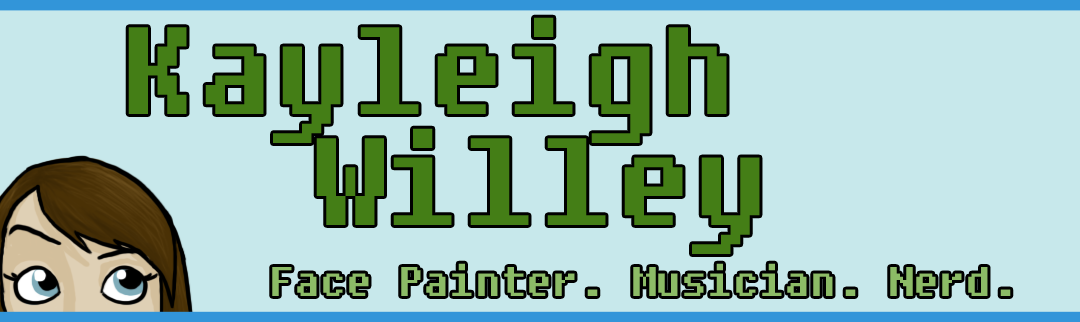
<style>
.page{position:relative;width:1080px;height:322px;background:#c7e8eb}
.page>*{position:absolute;margin:0}
.t1{font:123.3px "Fixedsys";color:#457e16}
.t2{font:41.3px "Fixedsys";color:#8dbc66}
</style>
<div class="page">
<p class="t1" style="left:128px;top:17px;width:599px;height:126px">Kayleigh</p>
<p class="t1" style="left:316px;top:128px;width:444px;height:126px">Willey</p>
<p class="t2" style="left:272px;top:263px;width:739px;height:33px">Face Painter. Musician. Nerd.</p>
</div>
